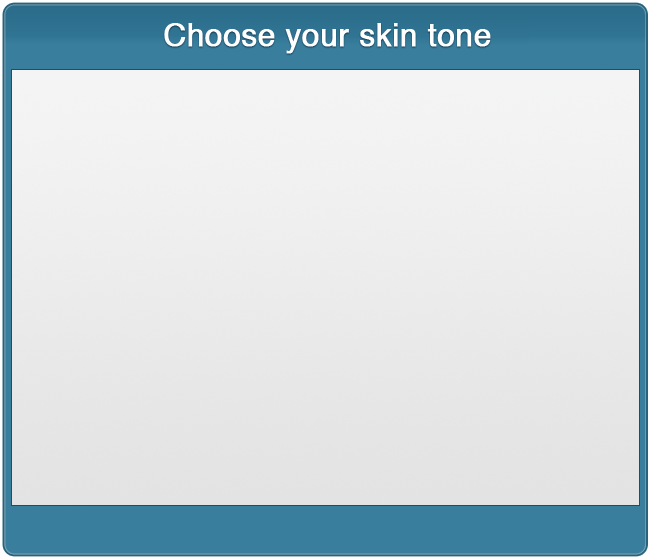
<style>
.page{position:relative;width:650px;height:559px}
.page>*{position:absolute;margin:0}
.t1{font:31.2px "Helvetica";color:#ffffff;font-weight:bold}
</style>
<div class="page">
<p class="t1" style="left:164px;top:23px;width:327px;height:31px">Choose your skin tone</p>
</div>
